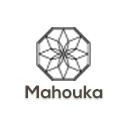
<style>
.page{position:relative;width:128px;height:128px;background:#ffffff}
.page>*{position:absolute;margin:0}
.t1{font:18px "NexaBold";color:#594443}
</style>
<div class="page">
<p class="t1" style="left:25px;top:85px;width:78px;height:14px">Mahouka</p>
</div>
